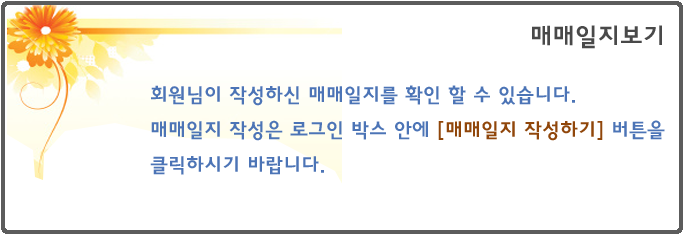
<style>
.page{position:relative;width:685px;height:235px;background:#ffffff}
.page>*{position:absolute;margin:0}
.t1{font:25px "HaanYGodic24";color:#494949}
.t2{font:20px "HaanYGodic24";color:#4c74b6}
.t3{font:20px "HaanYGodic24";color:#90460a}
</style>
<div class="page">
<p class="t1" style="left:532px;top:25px;width:130px;height:24px">매매일지보기</p>
<p class="t2" style="left:150px;top:85px;width:515px;height:90px">회원님이 작성하신 매매일지를 확인 할 수 있습니다. <br>매매일지 작성은 로그인 박스 안에 <span class="t3">[매매일지 작성하기]</span> 버튼을 클릭하시기 바랍니다.</p>
</div>
